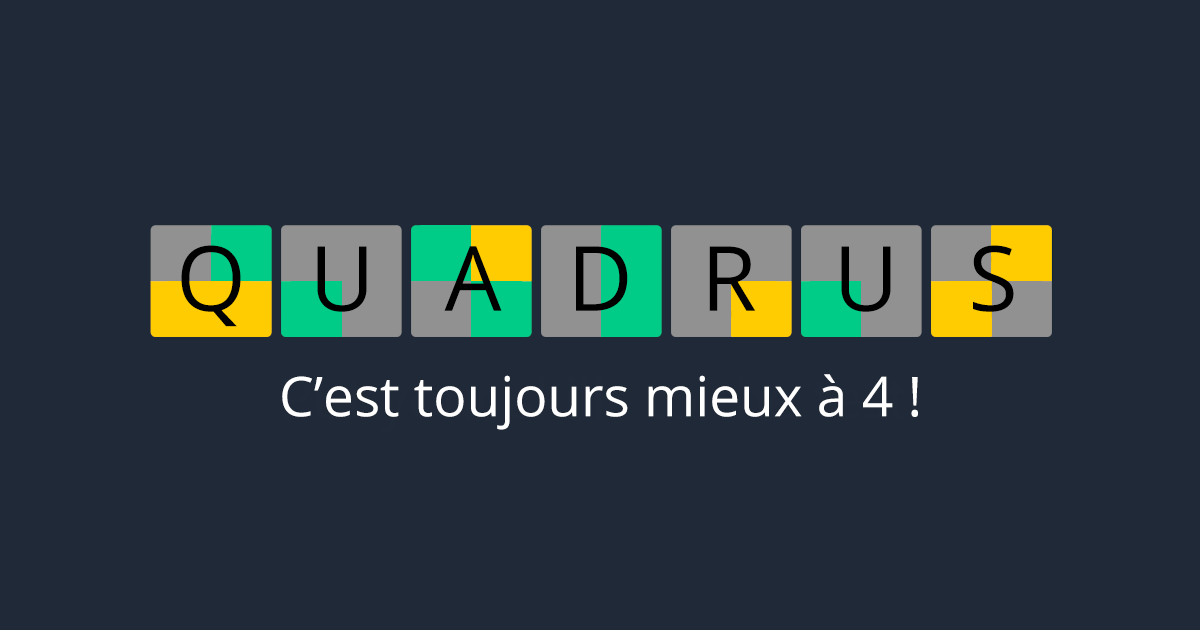
<style>
.page{position:relative;width:1200px;height:630px;background:#1f2937}
.page>*{position:absolute;margin:0}
.t1{font:90px "OpenSans";color:#000000}
.t2{font:55px "OpenSans";color:#ffffff}
</style>
<div class="page">
<p class="t1" style="left:181px;top:245px;width:60px;height:82px">Q</p>
<p class="t1" style="left:317px;top:246px;width:50px;height:66px">U</p>
<p class="t1" style="left:444px;top:246px;width:58px;height:65px">A</p>
<p class="t1" style="left:576px;top:246px;width:52px;height:65px">D</p>
<p class="t1" style="left:709px;top:246px;width:47px;height:65px">R</p>
<p class="t1" style="left:841px;top:246px;width:50px;height:66px">U</p>
<p class="t1" style="left:973px;top:245px;width:41px;height:67px">S</p>
<p class="t2" style="left:282px;top:374px;width:636px;height:56px">C’est toujours mieux à 4 !</p>
</div>
